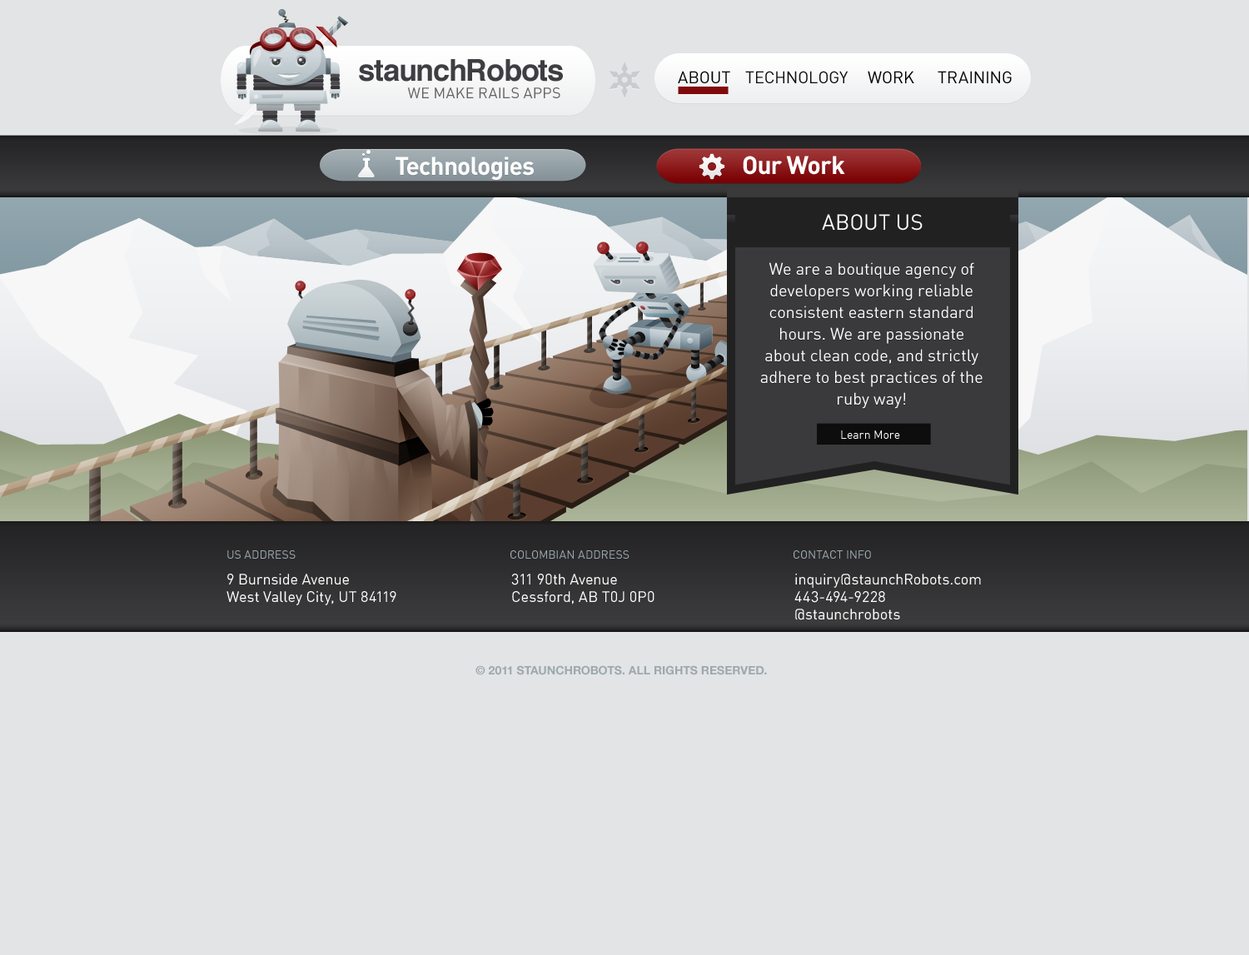
<style>
.page{position:relative;width:1249px;height:955px;background:#e3e4e6}
.page>*{position:absolute;margin:0}
.t1{font:30px "Helvetica-Bold";letter-spacing:-0.025em;color:#3e3e42}
.t2{font:16.7px "DINComp";color:#000000}
.t3{font:16.7px "DINComp";color:#0c0c0c}
.t4{font:15px "DINComp";color:#666262}
.t5{font:25px "DIN-Bold";letter-spacing:-0.025em;color:#ffffff}
.t6{font:21.6px "DINComp";color:#fefefe}
.t7{font:16.7px/21.6px "DINComp";color:#fefefe}
.t8{font:11.7px "DINComp";color:#fefefe}
.t9{font:11.7px "DINComp";color:#9da9ae;text-transform:uppercase}
.t10{font:15px/15px "DINComp";color:#ffffff}
.t11{font:11.7px "HelveticaNeue-Bold";color:#9da9ae;text-transform:uppercase}
</style>
<div class="page">
<p class="t1" style="left:359px;top:59px;width:204px;height:23px">staunchRobots</p>
<p class="t2" style="left:678px;top:71px;width:52px;height:12px">ABOUT</p>
<p class="t3" style="left:745px;top:71px;width:102px;height:12px">TECHNOLOGY</p>
<p class="t2" style="left:867px;top:71px;width:47px;height:12px">WORK</p>
<p class="t2" style="left:937px;top:71px;width:74px;height:12px">TRAINING</p>
<p class="t4" style="left:407px;top:87px;width:153px;height:11px">WE MAKE RAILS APPS</p>
<p class="t5" style="left:395px;top:157px;width:139px;height:23px">Technologies</p>
<p class="t5" style="left:743px;top:156px;width:102px;height:19px">Our Work</p>
<p class="t6" style="left:822px;top:214px;width:100px;height:17px">ABOUT US</p>
<p class="t7" style="left:760px;top:262px;width:222px;height:147px;text-align:center">We are a boutique agency of developers working reliable consistent eastern standard hours. We are passionate about clean code, and strictly adhere to best practices of the ruby way!</p>
<p class="t8" style="left:841px;top:430px;width:59px;height:9px">Learn More</p>
<p class="t9" style="left:227px;top:550px;width:69px;height:9px">US address</p>
<p class="t9" style="left:510px;top:550px;width:119px;height:9px">Colombian address</p>
<p class="t9" style="left:793px;top:550px;width:78px;height:9px">Contact Info</p>
<p class="t10" style="left:226px;top:574px;width:170px;height:31px">9 Burnside Avenue<br>West Valley City, UT 84119</p>
<p class="t10" style="left:511px;top:574px;width:143px;height:30px">311 90th Avenue<br>Cessford, AB T0J 0P0</p>
<p class="t10" style="left:794px;top:574px;width:187px;height:46px">inquiry@staunchRobots.com<br>443-494-9228<br>@staunchrobots</p>
<p class="t11" style="left:475px;top:665px;width:292px;height:10px">© 2011 StaunchRobots. All Rights Reserved.</p>
</div>
